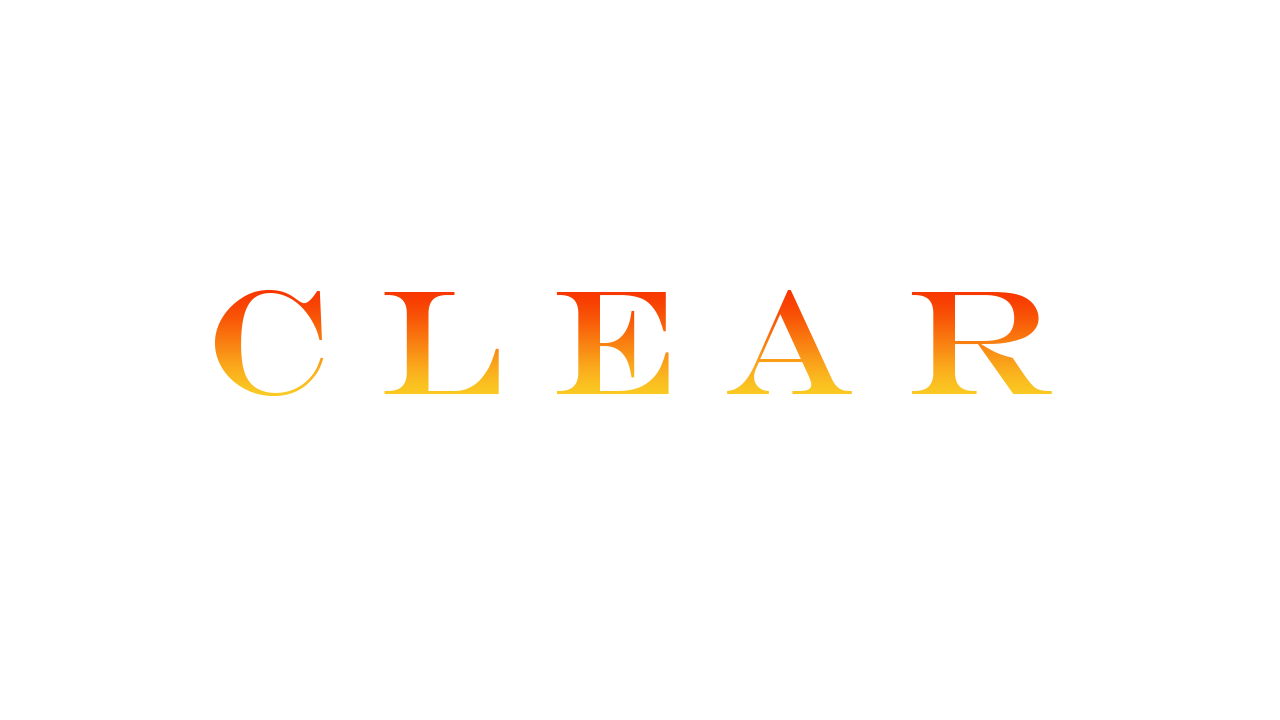
<style>
.page{position:relative;width:1280px;height:720px;background:#ffffff}
.page>*{position:absolute;margin:0}
.t1{font:150px "EngraversMT"}
</style>
<div class="page">
<p class="t1" style="left:214px;top:290px;width:838px;height:106px">C L E A R</p>
</div>
